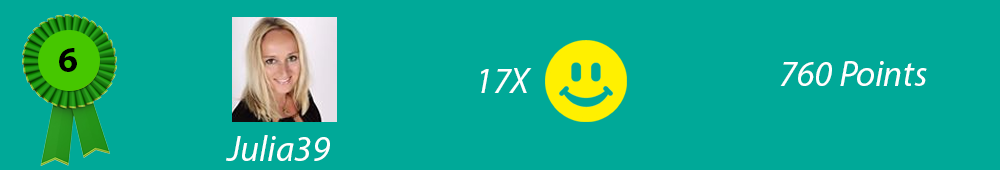
<style>
.page{position:relative;width:1000px;height:170px;background:#00a998}
.page>*{position:absolute;margin:0}
.t1{font:36px "MyriadPro-Bold";color:#000000}
.t2{font:36px "MyriadPro-It";color:#ffffff}
</style>
<div class="page">
<p class="t1" style="left:59px;top:48px;width:18px;height:24px">6</p>
<p class="t2" style="left:780px;top:61px;width:147px;height:25px">760 Points</p>
<p class="t2" style="left:481px;top:68px;width:51px;height:25px">17X</p>
<p class="t2" style="left:226px;top:135px;width:104px;height:26px">Julia39</p>
</div>
